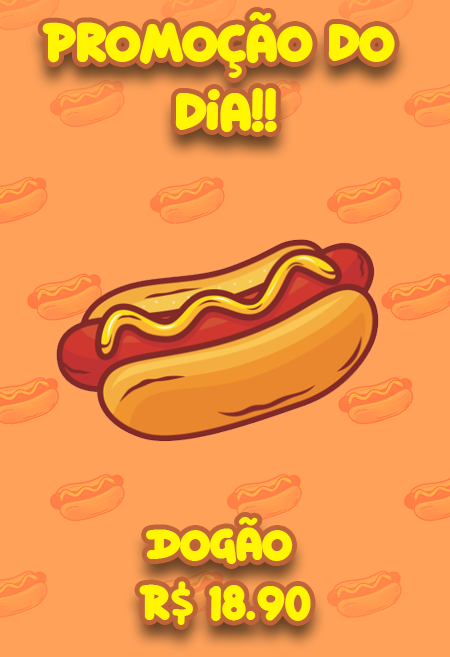
<style>
.page{position:relative;width:450px;height:657px;background:#ffa159}
.page>*{position:absolute;margin:0}
.t1{font:57.6px "DiloWorldRegular";color:#fff600}
.t2{font:50px "DiloWorldRegular";color:#fff600}
</style>
<div class="page">
<p class="t1" style="left:42px;top:12px;width:353px;height:120px;text-align:center">Promoção do <br>dia!!</p>
<p class="t2" style="left:139px;top:517px;width:172px;height:108px;text-align:center">Dogão <br>R# 18.90</p>
</div>
